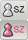
<style>
.page{position:relative;width:28px;height:40px}
.page>*{position:absolute;margin:0}
.t1{font:8.8px "ArialMT"}
</style>
<div class="page">
<p class="t1" style="left:14px;top:6px;width:11px;height:7px">SZ</p>
<p class="t1" style="left:14px;top:26px;width:11px;height:7px">SZ</p>
</div>
